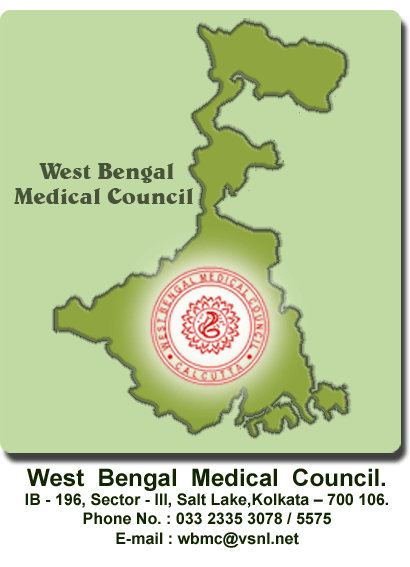
<style>
.page{position:relative;width:410px;height:567px;background:#c1d9a3}
.page>*{position:absolute;margin:0}
.t1{font:16px "Arial-BoldMT";color:#132401}
.t2{font:24px "Arial-BoldMT";color:#132401}
</style>
<div class="page">
<p class="t1" style="left:25px;top:468px;width:363px;height:80px;text-align:center"><span class="t2">West  Bengal  Medical  Council.<br></span>IB - 196, Sector - III, Salt Lake,Kolkata – 700 106.<br>Phone No. : 033 2335 3078 / 5575<br>E-mail : wbmc@vsnl.net</p>
</div>
